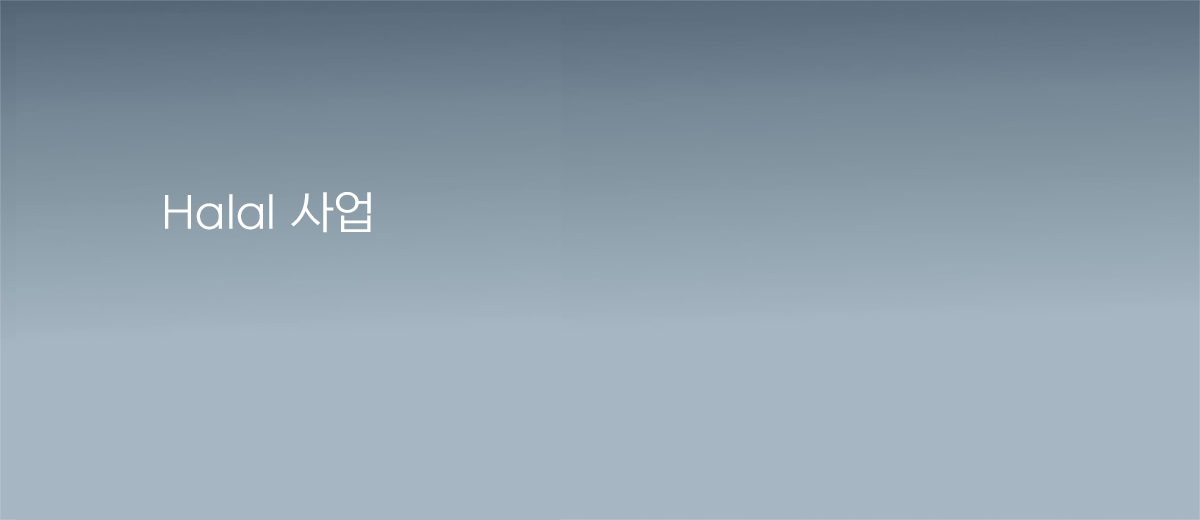
<style>
.page{position:relative;width:1200px;height:520px;background:#a6b6c3}
.page>*{position:absolute;margin:0}
.t1{font:45px "NEXONLv1GothicLowOTFRegular";color:#ffffff}
</style>
<div class="page">
<p class="t1" style="left:165px;top:192px;width:206px;height:41px">Halal 사업</p>
</div>
